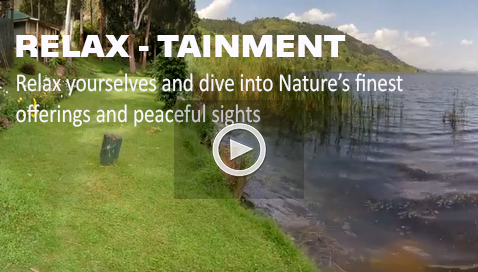
<style>
.page{position:relative;width:478px;height:272px}
.page>*{position:absolute;margin:0}
.t1{font:30px "Moire-ExtraBold";color:#fbfafe}
.t2{font:25.7px "Calibri";color:#f7f6f9;scale:0.83 1}
</style>
<div class="page">
<p class="t1" style="left:16px;top:35px;width:330px;height:22px">RELAX - TAINMENT</p>
<p class="t2" style="left:16px;top:73px;width:387px;height:54px">Relax yourselves and dive into Nature’s finest <br>offerings and peaceful sights</p>
</div>
